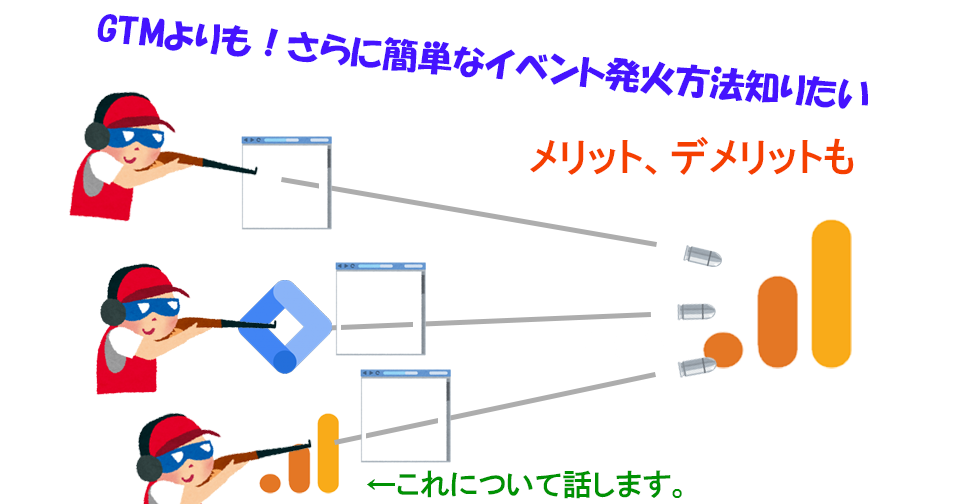
<style>
.page{position:relative;width:960px;height:504px;background:#ffffff}
.page>*{position:absolute;margin:0}
.t1{font:35px "HGPSoeiKakupoptai";color:#4513ff}
.t2{font:40px "HGPGothicE";color:#f53f00}
.t3{font:30px "HGPGothicE";color:#009203}
</style>
<div class="page">
<p class="t1" style="left:97px;top:14px;width:771px;height:95px;rotate:5deg">GTMよりも！さらに簡単なイベント発火方法知りたい</p>
<p class="t2" style="left:530px;top:136px;width:324px;height:39px">メリット、デメリットも</p>
<p class="t3" style="left:367px;top:470px;width:315px;height:29px">←これについて話します。</p>
</div>
